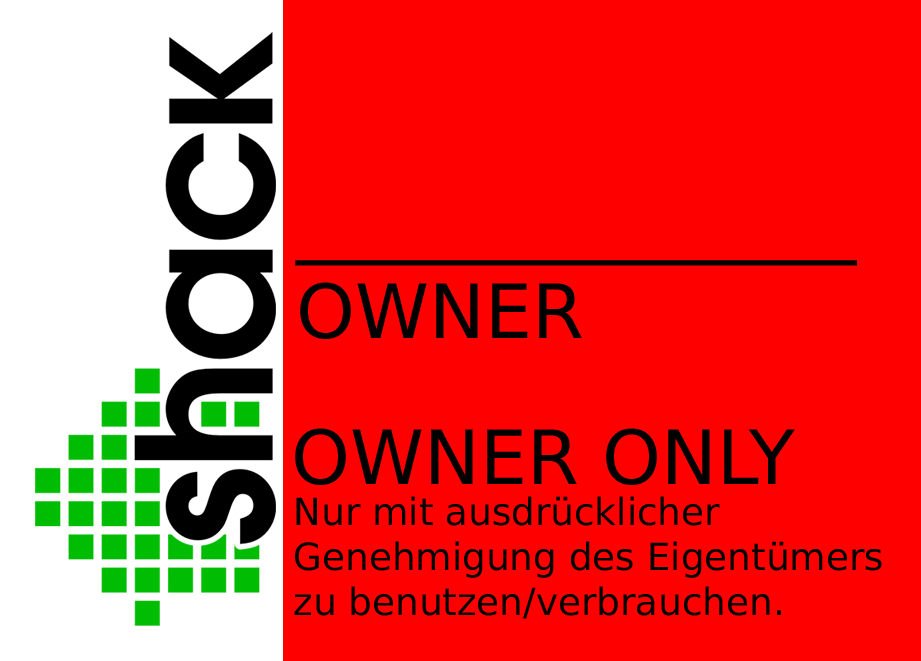
<style>
.page{position:relative;width:921px;height:661px;background:#ff0000}
.page>*{position:absolute;margin:0}
.t1{font:74.7px "PrimaSansBT-Roman";color:#000000}
.t2{font:37.4px "PrimaSansBT-Roman";color:#000000}
</style>
<div class="page">
<p class="t1" style="left:295px;top:260px;width:562px;height:79px">_______________<br>OWNER</p>
<p class="t1" style="left:295px;top:428px;width:500px;height:57px">OWNER ONLY</p>
<p class="t2" style="left:294px;top:496px;width:588px;height:123px">Nur mit ausdrücklicher<br>Genehmigung des Eigentümers<br>zu benutzen/verbrauchen.</p>
</div>
